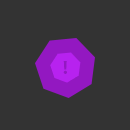
<style>
.page{position:relative;width:130px;height:130px;background:#333333}
.page>*{position:absolute;margin:0}
.t1{font:18px "MyriadPro-Bold";color:#9318c1}
</style>
<div class="page">
<p class="t1" style="left:63px;top:61px;width:4px;height:13px">!</p>
</div>
